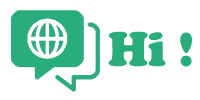
<style>
.page{position:relative;width:200px;height:100px;background:#ffffff}
.page>*{position:absolute;margin:0}
.t1{font:50px "CooperBlack";color:#29ad7d}
</style>
<div class="page">
<p class="t1" style="left:108px;top:31px;width:84px;height:36px">Hi !</p>
</div>
